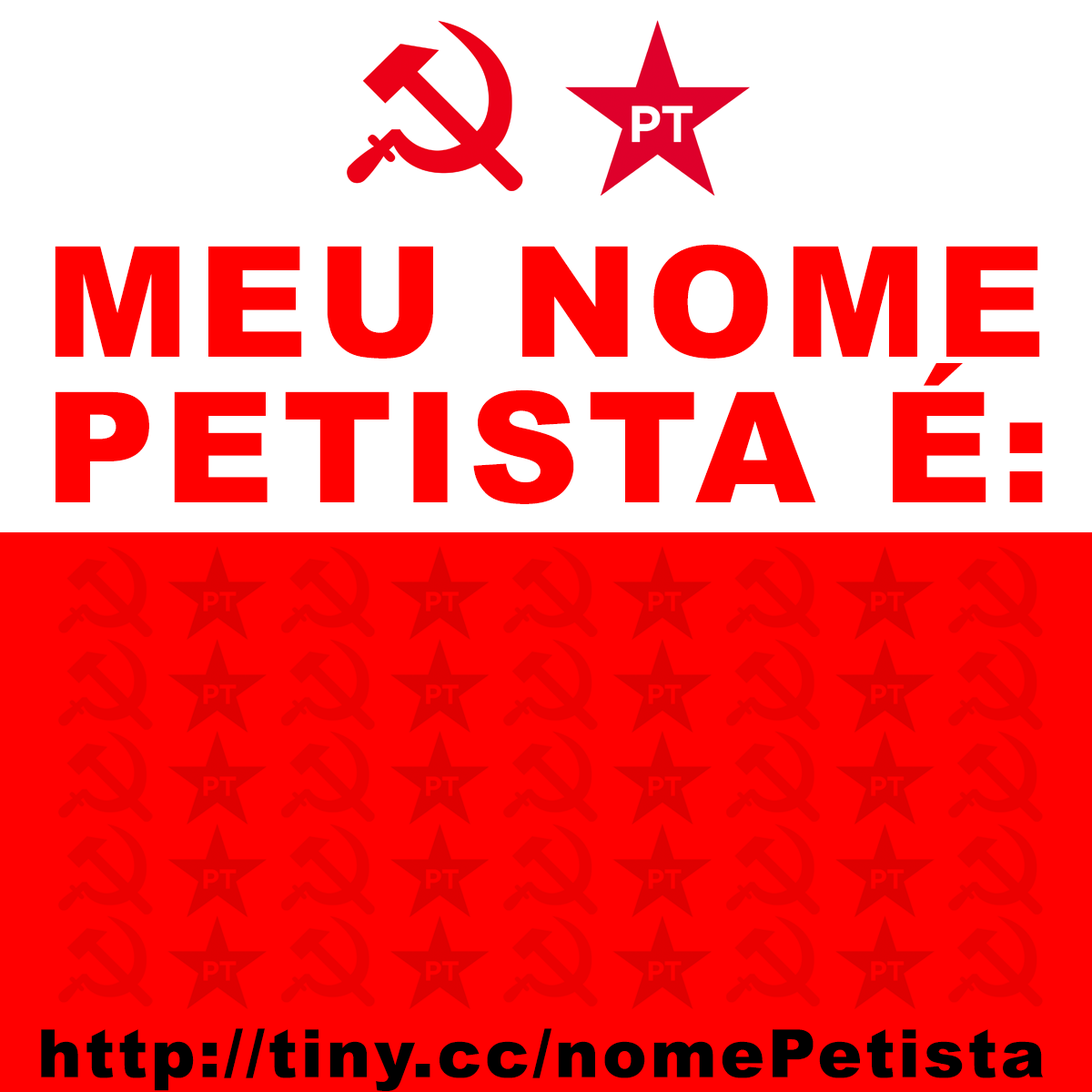
<style>
.page{position:relative;width:1092px;height:1092px;background:#ff0000}
.page>*{position:absolute;margin:0}
.t1{font:153.5px/145.6px "Arial-Black";letter-spacing:0.05em;color:#ff0000}
.t2{font:66.4px "Arial-Black";letter-spacing:0.05em;color:#000000}
</style>
<div class="page">
<p class="t1" style="left:55px;top:244px;width:988px;height:260px">MEU NOME<br>PETISTA É:</p>
<p class="t2" style="left:41px;top:1028px;width:1002px;height:63px">http://tiny.cc/nomePetista</p>
</div>
